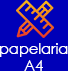
<style>
.page{position:relative;width:68px;height:71px;background:#0000b8}
.page>*{position:absolute;margin:0}
.t1{font:14.6px "CenturyGothic";color:#ffffff}
</style>
<div class="page">
<p class="t1" style="left:0px;top:43px;width:68px;height:28px;text-align:center">papelaria<br>A4</p>
</div>
